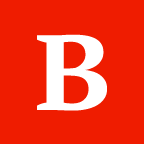
<style>
.page{position:relative;width:144px;height:144px;background:#ef1c00}
.page>*{position:absolute;margin:0}
.t1{font:106.3px "PTSerif-Bold";letter-spacing:-0.207em;color:#ffffff;scale:1.11 1}
</style>
<div class="page">
<p class="t1" style="left:37px;top:34px;width:70px;height:77px">B</p>
</div>
